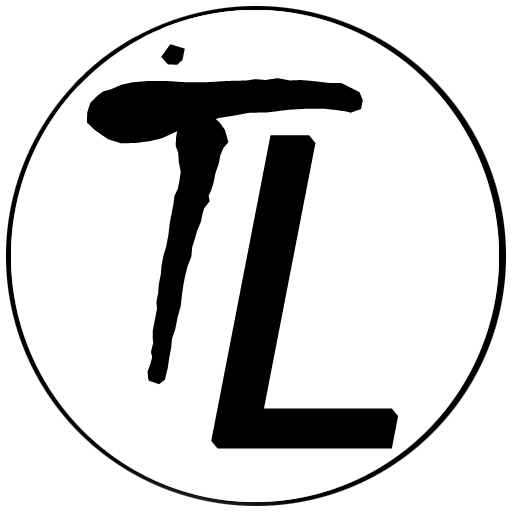
<style>
.page{position:relative;width:512px;height:512px;background:#ffffff}
.page>*{position:absolute;margin:0}
.t1{font:450px "Chiller-Regular";letter-spacing:0.01em;color:#000000;font-weight:bold;font-style:italic;scale:1.1 1}
.t2{font:450px "OratorStd";letter-spacing:0.01em;color:#000000;font-weight:bold;font-style:italic;scale:1.1 1}
</style>
<div class="page">
<p class="t1" style="left:87px;top:44px;width:276px;height:341px">T</p>
<p class="t2" style="left:211px;top:135px;width:187px;height:314px">L</p>
</div>
